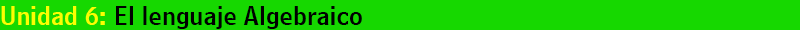
<style>
.page{position:relative;width:800px;height:30px;background:#16d800}
.page>*{position:absolute;margin:0}
.t1{font:25px "BellCentennialBT-NameAndNumber";color:#000000}
.t2{font:25px "BellCentennialBT-NameAndNumber";color:#fbfe02}
</style>
<div class="page">
<p class="t1" style="left:1px;top:6px;width:361px;height:23px"><span class="t2">Unidad 6: </span>El lenguaje Algebraico</p>
</div>
